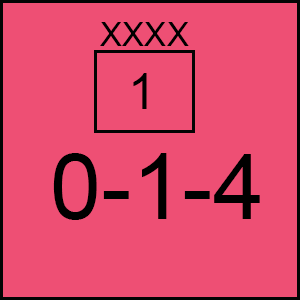
<style>
.page{position:relative;width:300px;height:300px;background:#ee4f74}
.page>*{position:absolute;margin:0}
.t1{font:33.3px "ArialMT";color:#000000}
.t2{font:50px "ArialMT";color:#000000}
.t3{font:91.7px "ArialMT";color:#000000}
</style>
<div class="page">
<p class="t1" style="left:100px;top:22px;width:89px;height:24px">XXXX</p>
<p class="t2" style="left:133px;top:73px;width:14px;height:36px">1</p>
<p class="t3" style="left:53px;top:153px;width:207px;height:67px">0-1-4</p>
</div>
